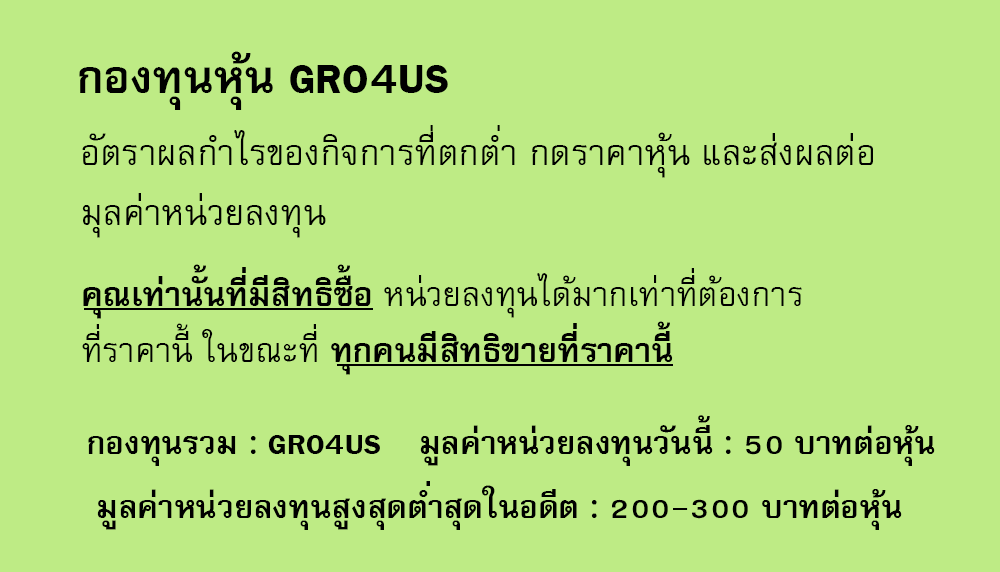
<style>
.page{position:relative;width:1000px;height:572px;background:#beeb85}
.page>*{position:absolute;margin:0}
.t1{font:64px "FreesiaUPCBold";color:#000000}
.t2{font:50px/60px "FreesiaUPC";color:#000000}
.t3{font:47px "FreesiaUPC";color:#000000}
.t4{font:47px "FreesiaUPCBold";color:#000000}
.t5{font:45px "FreesiaUPCBold";color:#000000}
</style>
<div class="page">
<p class="t1" style="left:79px;top:51px;width:369px;height:59px">กองทุนหุ้น GRO4US</p>
<p class="t2" style="left:82px;top:125px;width:791px;height:113px">อัตราผลกำไรของกิจการที่ตกต่ำ กดราคาหุ้น และส่งผลต่อ<br>มุลค่าหน่วยลงทุน</p>
<p class="t3" style="left:82px;top:264px;width:720px;height:111px"><span class="t4">คุณเท่านั้นที่มีสิทธิซื้อ </span>หน่วยลงทุนได้มากเท่าที่ต้องการ<br>ที่ราคานี้ ในขณะที่<span class="t4"> ทุกคนมีสิทธิขายที่ราคานี้</span></p>
<p class="t5" style="left:420px;top:415px;width:515px;height:51px">มูลค่าหน่วยลงทุนวันนี้ : 50 บาทต่อหุ้น</p>
<p class="t5" style="left:88px;top:435px;width:292px;height:31px">กองทุนรวม : GRO4US</p>
<p class="t5" style="left:97px;top:481px;width:805px;height:49px">มูลค่าหน่วยลงทุนสูงสุดต่ำสุดในอดีต : 200-300 บาทต่อหุ้น</p>
</div>
